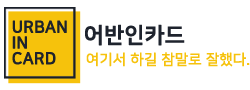
<style>
.page{position:relative;width:250px;height:90px;background:#ffffff}
.page>*{position:absolute;margin:0}
.t1{font:16.2px/15.7px "NanumSquareB";color:#1e232d;font-weight:bold}
.t2{font:21.6px "NanumSquareB";color:#1e232d;font-weight:bold}
.t3{font:14.4px "NanumSquareR";color:#f6c20c;font-weight:bold}
</style>
<div class="page">
<p class="t1" style="left:12px;top:20px;width:55px;height:45px">URBAN<br>IN<br>CARD</p>
<p class="t2" style="left:85px;top:24px;width:100px;height:22px">어반인카드</p>
<p class="t3" style="left:86px;top:52px;width:164px;height:15px">여기서 하길 참말로 잘했다.</p>
</div>
